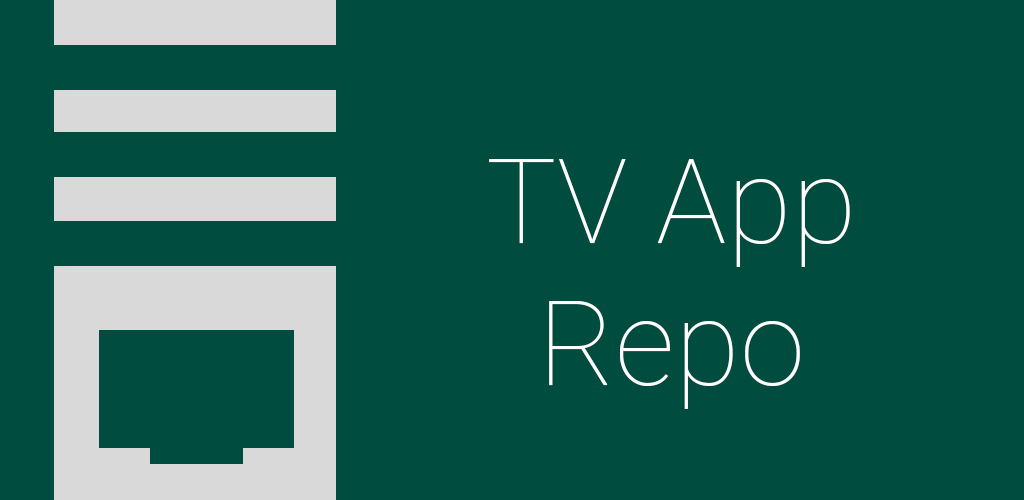
<style>
.page{position:relative;width:1024px;height:500px;background:#004d40}
.page>*{position:absolute;margin:0}
.t1{font:118.4px "Roboto-Thin";color:#ffffff}
</style>
<div class="page">
<p class="t1" style="left:489px;top:159px;width:361px;height:250px;text-align:center">TV App Repo</p>
</div>
